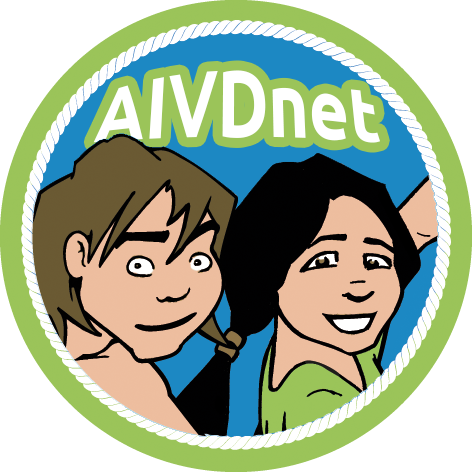
<style>
.page{position:relative;width:472px;height:472px;background:#ffffff}
.page>*{position:absolute;margin:0}
.t1{font:68.7px "Ubuntu-Bold";color:#ffffff}
</style>
<div class="page">
<p class="t1" style="left:93px;top:70px;width:287px;height:73px">AIVDnet</p>
</div>
